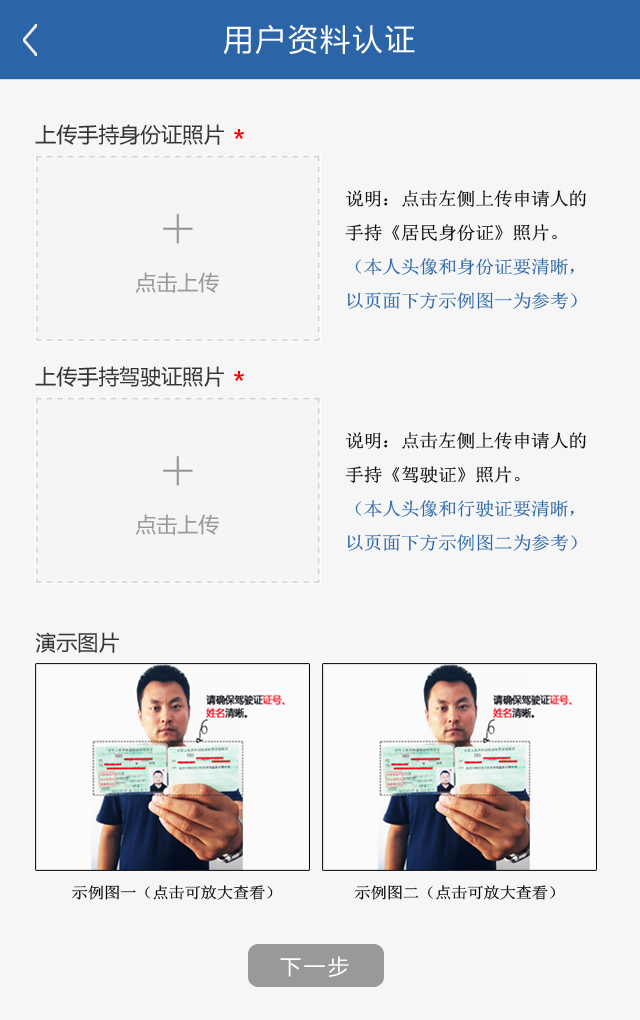
<style>
.page{position:relative;width:640px;height:1020px;background:#f6f6f6}
.page>*{position:absolute;margin:0}
.t1{font:30px "MicrosoftYaHei";letter-spacing:0.08em;color:#ffffff}
.t2{font:21px "MicrosoftYaHei";color:#353535}
.t3{font:18px/34px "SimSun";letter-spacing:-0.02em;color:#2b65a7;scale:1.06 1}
.t4{font:18px/34px "SimSun";letter-spacing:-0.02em;color:#060606;scale:1.06 1}
.t5{font:21px "MicrosoftYaHei";color:#999999}
.t6{font:15.6px "SimSun";letter-spacing:-0.02em;color:#000000;scale:1.06 1}
.t7{font:21px "MicrosoftYaHei";letter-spacing:0.14em;color:#ffffff}
</style>
<div class="page">
<p class="t1" style="left:223px;top:24px;width:192px;height:31px">用户资料认证</p>
<p class="t2" style="left:35px;top:124px;width:189px;height:21px">上传手持身份证照片</p>
<p class="t3" style="left:345px;top:190px;width:241px;height:119px"><span class="t4">说明：点击左侧上传申请人的手持《居民身份证》照片。<br></span>（本人头像和身份证要清晰，以页面下方示例图一为参考）</p>
<p class="t5" style="left:135px;top:272px;width:84px;height:21px">点击上传</p>
<p class="t2" style="left:35px;top:366px;width:189px;height:21px">上传手持驾驶证照片</p>
<p class="t3" style="left:345px;top:432px;width:241px;height:119px"><span class="t4">说明：点击左侧上传申请人的手持《驾驶证》照片。<br></span>（本人头像和行驶证要清晰，以页面下方示例图二为参考）</p>
<p class="t5" style="left:135px;top:514px;width:84px;height:21px">点击上传</p>
<p class="t2" style="left:35px;top:632px;width:84px;height:21px">演示图片</p>
<p class="t6" style="left:72px;top:885px;width:201px;height:15px">示例图一（点击可放大查看）</p>
<p class="t6" style="left:355px;top:885px;width:200px;height:15px">示例图二（点击可放大查看）</p>
<p class="t7" style="left:280px;top:956px;width:69px;height:21px">下一步</p>
</div>
